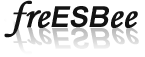
<style>
.page{position:relative;width:145px;height:57px;background:#ffffff}
.page>*{position:absolute;margin:0}
.t1{font:38.2px "MonotypeCorsiva";color:#131313;font-weight:bold}
.t2{font:28.7px "Arial-BoldMT";color:#131313;font-style:italic}
</style>
<div class="page">
<p class="t1" style="left:4px;top:0px;width:134px;height:38px">fre<span class="t2">ESB</span>ee</p>
</div>
